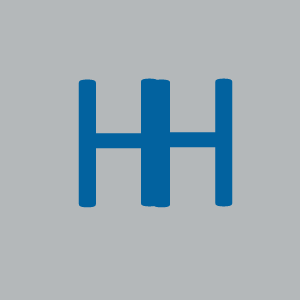
<style>
.page{position:relative;width:300px;height:300px;background:#b4b8ba}
.page>*{position:absolute;margin:0}
.t1{font:200px "Calibri";color:#02629f}
</style>
<div class="page">
<p class="t1" style="left:141px;top:78px;width:92px;height:129px">H</p>
<p class="t1" style="left:78px;top:79px;width:92px;height:129px">H</p>
</div>
